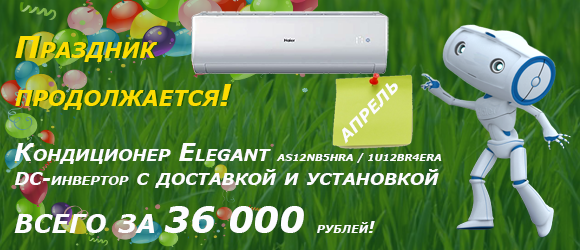
<style>
.page{position:relative;width:580px;height:250px}
.page>*{position:absolute;margin:0}
.t1{font:30px/48px "Verdana-BoldItalic";color:#fcdc02;font-variant:small-caps}
.t2{font:30px/48px "Verdana-BoldItalic";font-variant:small-caps}
.t3{font:24px "Verdana-BoldItalic";color:#fcfcfe;font-variant:small-caps}
.t4{font:24px/24px "Verdana-BoldItalic";color:#fcfcfe;font-variant:small-caps}
.t5{font:10px/24px "Verdana-BoldItalic";color:#fcfcfe;font-variant:small-caps}
.t6{font:18px/24px "Verdana-BoldItalic";color:#fcfcfe;font-variant:small-caps}
.t7{font:36px/24px "Verdana-BoldItalic";color:#fcfcfe;font-variant:small-caps}
.t8{font:16px/24px "Verdana-BoldItalic";color:#fcfcfe;font-variant:small-caps}
</style>
<div class="page">
<p class="t1" style="left:15px;top:36px;width:217px;height:74px">Праздник продолжается!</p>
<p class="t2" style="left:16px;top:36px;width:217px;height:74px">Праздник продолжается!</p>
<p class="t3" style="left:342px;top:83px;width:56px;height:61px;rotate:-46deg">апрель</p>
<p class="t4" style="left:14px;top:143px;width:428px;height:90px">Кондиционер Elegant <span class="t5">AS12NB5HRA / 1U12BR4ERA<br></span><span class="t6">DC-инвертор</span> с доставкой и установкой<br><br><span class="t7">всего за 36 000 </span><span class="t8">рублей!</span></p>
</div>
